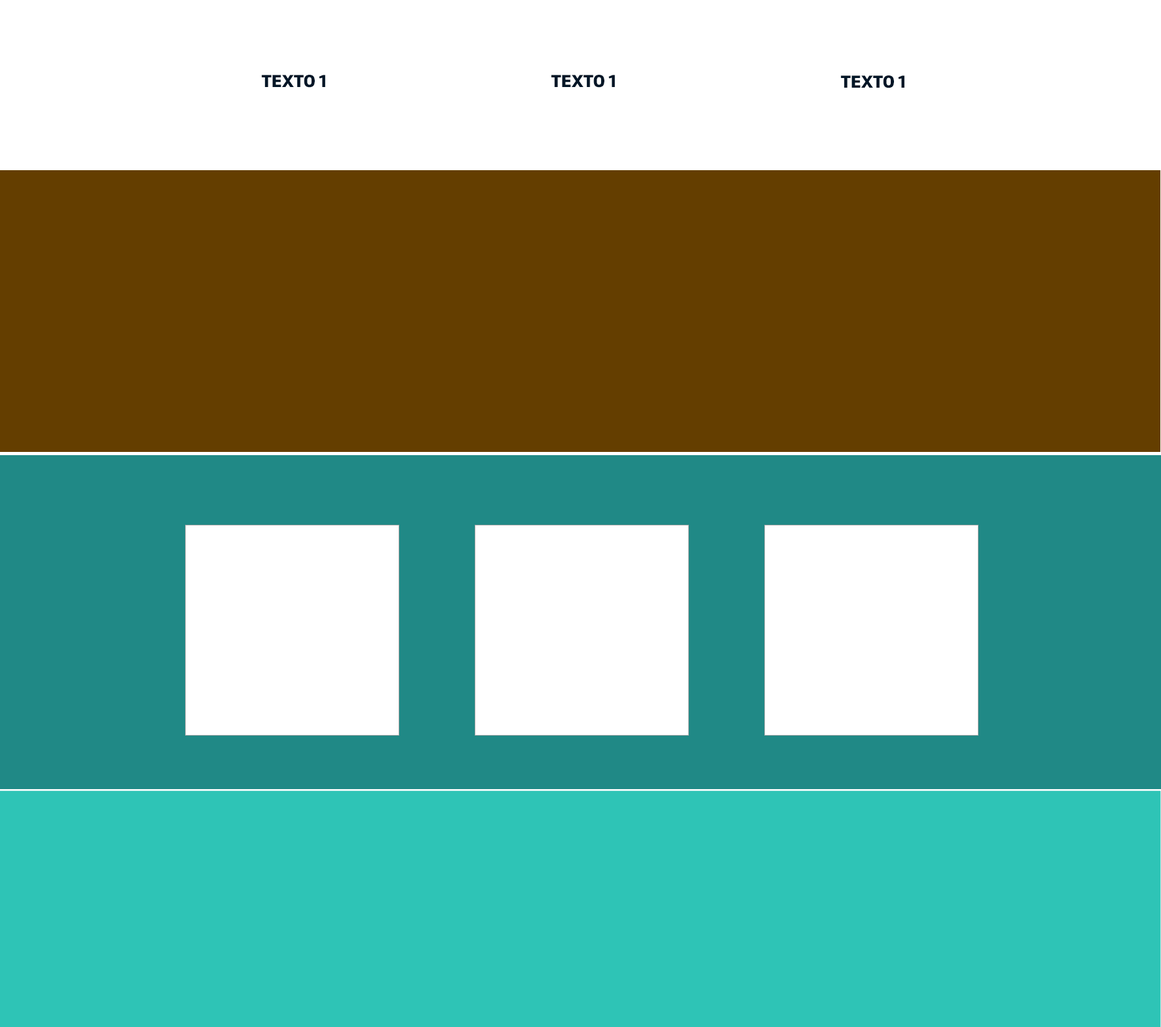
<style>
.page{position:relative;width:1161px;height:1027px;background:#ffffff}
.page>*{position:absolute;margin:0}
.t1{font:18.1px "Amelia-Basic-Black";color:#011627}
</style>
<div class="page">
<p class="t1" style="left:261px;top:75px;width:65px;height:13px">TEXTO 1</p>
<p class="t1" style="left:551px;top:75px;width:64px;height:13px">TEXTO 1</p>
<p class="t1" style="left:840px;top:75px;width:65px;height:13px">TEXTO 1</p>
</div>
